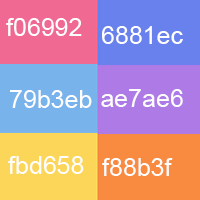
<style>
.page{position:relative;width:200px;height:200px}
.page>*{position:absolute;margin:0}
.t1{font:25px "ArialMT";color:#fffefe}
</style>
<div class="page">
<p class="t1" style="left:6px;top:18px;width:76px;height:18px">f06992</p>
<p class="t1" style="left:102px;top:26px;width:81px;height:18px">6881ec</p>
<p class="t1" style="left:101px;top:89px;width:82px;height:18px">ae7ae6</p>
<p class="t1" style="left:10px;top:90px;width:82px;height:18px">79b3eb</p>
<p class="t1" style="left:8px;top:156px;width:76px;height:18px">fbd658</p>
<p class="t1" style="left:102px;top:158px;width:71px;height:18px">f88b3f</p>
</div>
